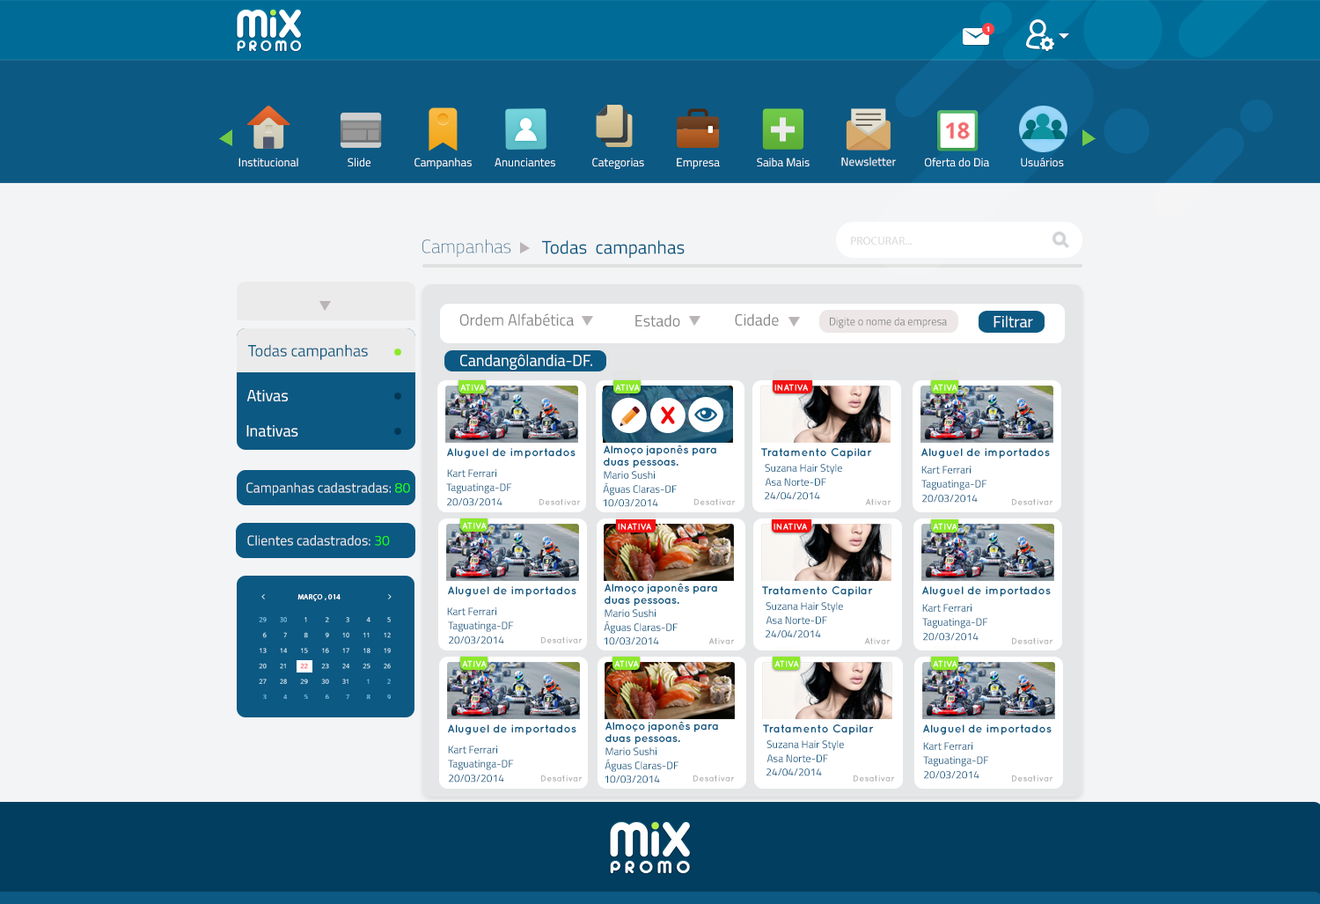
<style>
.page{position:relative;width:1320px;height:904px;background:#f3f4f5}
.page>*{position:absolute;margin:0}
.t1{font:7px "OpenSans-Bold";color:#ffffff}
.t2{font:51.9px "TitilliumWeb-Bold";color:#ebebeb}
.t3{font:21.9px "OpenSans-Bold";color:#f0686b;text-transform:uppercase}
.t4{font:11.7px "TitilliumWeb-Regular";color:#ffffff}
.t5{font:18.5px "TitilliumWeb-Thin"}
.t6{font:18.5px "TitilliumWeb-Regular";color:#0c5983}
.t7{font:11.4px "MyriadPro-Regular";letter-spacing:0.013em;color:#d2d4d8;text-transform:uppercase}
.t8{font:16px "TitilliumWeb-Regular";color:#878787}
.t9{font:10.9px "TitilliumWeb-Regular";color:#878787}
.t10{font:16px "TitilliumWeb-Regular";color:#ffffff}
.t11{font:16px "TitilliumWeb-Regular";color:#0c5983}
.t12{font:8.9px "QuicksandBold-Regular";color:#ffffff}
.t13{font:35.2px "QuicksandBold-Regular";letter-spacing:-0.025em;color:#f00606}
.t14{font:11.4px "QuicksandBold-Regular";letter-spacing:0.005em;color:#0c5983}
.t15{font:11.4px/12.2px "QuicksandBold-Regular";letter-spacing:-0.025em;color:#0c5983}
.t16{font:10.6px "TitilliumWeb-Regular";color:#0c5983}
.t17{font:13.9px "TitilliumWeb-Regular";color:#ebebeb}
.t18{font:13.9px "TitilliumWeb-Regular";color:#1bff03}
.t19{font:8.9px "QuicksandBold-Regular";color:#b4b3b3}
.t20{font:7.2px "MyriadPro-Regular";letter-spacing:0.051em;color:#ffffff;text-transform:uppercase}
.t21{font:6.2px/15.4px "OpenSans";text-transform:uppercase}
</style>
<div class="page">
<p class="t1" style="left:986px;top:26px;width:4px;height:7px">1</p>
<p class="t2" style="left:771px;top:117px;width:23px;height:25px">+</p>
<p class="t3" style="left:946px;top:121px;width:24px;height:19px">18</p>
<p class="t4" style="left:238px;top:157px;width:60px;height:10px">Institucional</p>
<p class="t4" style="left:348px;top:157px;width:22px;height:10px">Slide</p>
<p class="t4" style="left:414px;top:157px;width:58px;height:12px">Campanhas</p>
<p class="t4" style="left:494px;top:157px;width:61px;height:10px">Anunciantes</p>
<p class="t4" style="left:592px;top:157px;width:52px;height:12px">Categorias</p>
<p class="t4" style="left:677px;top:157px;width:43px;height:12px">Empresa</p>
<p class="t4" style="left:757px;top:157px;width:52px;height:10px">Saiba Mais</p>
<p class="t4" style="left:841px;top:157px;width:55px;height:9px">Newsletter</p>
<p class="t4" style="left:925px;top:157px;width:64px;height:10px">Oferta do Dia</p>
<p class="t4" style="left:1021px;top:157px;width:43px;height:10px">Usuários</p>
<p class="t5" style="left:422px;top:239px;width:89px;height:18px">Campanhas</p>
<p class="t6" style="left:542px;top:240px;width:142px;height:18px">Todas  campanhas</p>
<p class="t7" style="left:851px;top:237px;width:61px;height:8px">PROCURAR...</p>
<p class="t8" style="left:459px;top:313px;width:115px;height:13px">Ordem Alfabética</p>
<p class="t8" style="left:635px;top:314px;width:45px;height:12px">Estado</p>
<p class="t8" style="left:735px;top:313px;width:44px;height:13px">Cidade</p>
<p class="t9" style="left:830px;top:317px;width:117px;height:11px">Digite o nome da empresa</p>
<p class="t10" style="left:993px;top:315px;width:40px;height:12px">Filtrar</p>
<p class="t11" style="left:248px;top:344px;width:120px;height:16px">Todas campanhas</p>
<p class="t10" style="left:460px;top:354px;width:132px;height:16px">Candangôlandia-DF.</p>
<p class="t10" style="left:247px;top:390px;width:41px;height:11px">Ativas</p>
<p class="t12" style="left:460px;top:384px;width:25px;height:7px">ATIVA</p>
<p class="t12" style="left:615px;top:384px;width:25px;height:7px">ATIVA</p>
<p class="t12" style="left:774px;top:384px;width:34px;height:7px">INATIVA</p>
<p class="t12" style="left:933px;top:384px;width:24px;height:7px">ATIVA</p>
<p class="t13" style="left:661px;top:406px;width:14px;height:18px">x</p>
<p class="t10" style="left:246px;top:425px;width:52px;height:11px">Inativas</p>
<p class="t14" style="left:447px;top:448px;width:128px;height:10px">Aluguel de importados</p>
<p class="t15" style="left:604px;top:444px;width:112px;height:24px">Almoço japonês para <br>duas pessoas.</p>
<p class="t14" style="left:761px;top:448px;width:111px;height:10px">Tratamento Capilar</p>
<p class="t14" style="left:921px;top:448px;width:129px;height:10px">Aluguel de importados</p>
<p class="t16" style="left:447px;top:469px;width:49px;height:8px">Kart Ferrari</p>
<p class="t16" style="left:604px;top:471px;width:51px;height:8px">Mario Sushi</p>
<p class="t16" style="left:765px;top:464px;width:77px;height:10px">Suzana Hair Style</p>
<p class="t16" style="left:921px;top:465px;width:49px;height:8px">Kart Ferrari</p>
<p class="t17" style="left:246px;top:482px;width:164px;height:13px">Campanhas cadastradas: <span class="t18">80</span></p>
<p class="t16" style="left:446px;top:483px;width:66px;height:11px">Taguatinga-DF</p>
<p class="t16" style="left:603px;top:482px;width:74px;height:13px">Águas Claras-DF</p>
<p class="t16" style="left:765px;top:478px;width:61px;height:8px">Asa Norte-DF</p>
<p class="t16" style="left:921px;top:479px;width:66px;height:11px">Taguatinga-DF</p>
<p class="t16" style="left:447px;top:497px;width:55px;height:9px">20/03/2014</p>
<p class="t19" style="left:539px;top:498px;width:42px;height:7px">Desativar</p>
<p class="t16" style="left:603px;top:498px;width:55px;height:9px">10/03/2014</p>
<p class="t19" style="left:694px;top:498px;width:42px;height:7px">Desativar</p>
<p class="t16" style="left:765px;top:491px;width:55px;height:9px">24/04/2014</p>
<p class="t19" style="left:865px;top:498px;width:26px;height:7px">Ativar</p>
<p class="t16" style="left:922px;top:494px;width:55px;height:8px">20/03/2014</p>
<p class="t19" style="left:1012px;top:498px;width:41px;height:7px">Desativar</p>
<p class="t12" style="left:462px;top:522px;width:25px;height:7px">ATIVA</p>
<p class="t12" style="left:618px;top:523px;width:33px;height:7px">INATIVA</p>
<p class="t12" style="left:773px;top:523px;width:34px;height:7px">INATIVA</p>
<p class="t12" style="left:933px;top:523px;width:24px;height:7px">ATIVA</p>
<p class="t17" style="left:247px;top:535px;width:143px;height:10px">Clientes cadastrados: <span class="t18">30</span></p>
<p class="t20" style="left:297px;top:594px;width:43px;height:7px">MARÇO , 014</p>
<p class="t14" style="left:448px;top:586px;width:128px;height:11px">Aluguel de importados</p>
<p class="t15" style="left:604px;top:582px;width:113px;height:24px">Almoço japonês para <br>duas pessoas.</p>
<p class="t14" style="left:762px;top:586px;width:111px;height:11px">Tratamento Capilar</p>
<p class="t14" style="left:922px;top:586px;width:128px;height:11px">Aluguel de importados</p>
<p class="t16" style="left:765px;top:602px;width:78px;height:10px">Suzana Hair Style</p>
<p class="t16" style="left:922px;top:604px;width:49px;height:7px">Kart Ferrari</p>
<p class="t21" style="left:259px;top:617px;width:8px;height:82px;text-align:right">29<br>6<br>13<br>20<br>27<br>3</p>
<p class="t21" style="left:280px;top:617px;width:7px;height:82px;text-align:right">30<br>7<br>14<br>21<br>28<br>4</p>
<p class="t21" style="left:300px;top:617px;width:8px;height:82px;text-align:right">1<br>8<br>15<br>22<br>29<br>5</p>
<p class="t21" style="left:321px;top:617px;width:8px;height:82px;text-align:right">2<br>9<br>16<br>23<br>30<br>6</p>
<p class="t21" style="left:342px;top:617px;width:7px;height:82px;text-align:right">3<br>10<br>17<br>24<br>31<br>7</p>
<p class="t21" style="left:362px;top:617px;width:8px;height:82px;text-align:right">4<br>11<br>18<br>25<br>1<br>8</p>
<p class="t21" style="left:384px;top:617px;width:7px;height:82px;text-align:right">5<br>12<br>19<br>26<br>2<br>9</p>
<p class="t16" style="left:447px;top:607px;width:49px;height:8px">Kart Ferrari</p>
<p class="t16" style="left:604px;top:609px;width:51px;height:8px">Mario Sushi</p>
<p class="t16" style="left:765px;top:616px;width:62px;height:8px">Asa Norte-DF</p>
<p class="t16" style="left:922px;top:618px;width:66px;height:10px">Taguatinga-DF</p>
<p class="t16" style="left:448px;top:621px;width:66px;height:11px">Taguatinga-DF</p>
<p class="t16" style="left:604px;top:620px;width:73px;height:13px">Águas Claras-DF</p>
<p class="t16" style="left:765px;top:629px;width:56px;height:9px">24/04/2014</p>
<p class="t16" style="left:449px;top:635px;width:55px;height:9px">20/03/2014</p>
<p class="t19" style="left:541px;top:636px;width:41px;height:7px">Desativar</p>
<p class="t16" style="left:604px;top:636px;width:55px;height:9px">10/03/2014</p>
<p class="t19" style="left:708px;top:637px;width:27px;height:7px">Ativar</p>
<p class="t19" style="left:864px;top:637px;width:26px;height:7px">Ativar</p>
<p class="t16" style="left:923px;top:632px;width:55px;height:8px">20/03/2014</p>
<p class="t19" style="left:1012px;top:637px;width:41px;height:7px">Desativar</p>
<p class="t12" style="left:462px;top:660px;width:25px;height:7px">ATIVA</p>
<p class="t12" style="left:614px;top:660px;width:25px;height:7px">ATIVA</p>
<p class="t12" style="left:774px;top:660px;width:25px;height:7px">ATIVA</p>
<p class="t12" style="left:933px;top:660px;width:24px;height:7px">ATIVA</p>
<p class="t14" style="left:448px;top:724px;width:128px;height:11px">Aluguel de importados</p>
<p class="t15" style="left:605px;top:721px;width:113px;height:23px">Almoço japonês para <br>duas pessoas.</p>
<p class="t14" style="left:763px;top:724px;width:111px;height:11px">Tratamento Capilar</p>
<p class="t14" style="left:923px;top:724px;width:128px;height:11px">Aluguel de importados</p>
<p class="t16" style="left:448px;top:745px;width:49px;height:8px">Kart Ferrari</p>
<p class="t16" style="left:605px;top:747px;width:51px;height:8px">Mario Sushi</p>
<p class="t16" style="left:766px;top:740px;width:78px;height:10px">Suzana Hair Style</p>
<p class="t16" style="left:923px;top:742px;width:49px;height:8px">Kart Ferrari</p>
<p class="t16" style="left:448px;top:759px;width:66px;height:11px">Taguatinga-DF</p>
<p class="t16" style="left:604px;top:758px;width:74px;height:14px">Águas Claras-DF</p>
<p class="t16" style="left:766px;top:754px;width:62px;height:8px">Asa Norte-DF</p>
<p class="t16" style="left:923px;top:756px;width:66px;height:10px">Taguatinga-DF</p>
<p class="t16" style="left:449px;top:773px;width:55px;height:9px">20/03/2014</p>
<p class="t16" style="left:766px;top:767px;width:56px;height:9px">24/04/2014</p>
<p class="t16" style="left:924px;top:770px;width:55px;height:9px">20/03/2014</p>
<p class="t19" style="left:541px;top:774px;width:41px;height:7px">Desativar</p>
<p class="t16" style="left:604px;top:774px;width:56px;height:9px">10/03/2014</p>
<p class="t19" style="left:693px;top:774px;width:42px;height:7px">Desativar</p>
<p class="t19" style="left:853px;top:774px;width:42px;height:7px">Desativar</p>
<p class="t19" style="left:1012px;top:774px;width:41px;height:7px">Desativar</p>
</div>
